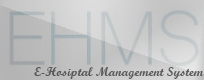
<style>
.page{position:relative;width:204px;height:80px}
.page>*{position:absolute;margin:0}
.t1{font:13px "ScriptMTBold";color:#444444}
</style>
<div class="page">
<p class="t1" style="left:34px;top:67px;width:170px;height:12px;opacity:0.92">E-Hosiptal Management System</p>
</div>
